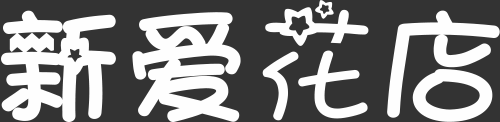
<style>
.page{position:relative;width:500px;height:122px;background:#333333}
.page>*{position:absolute;margin:0}
.t1{font:125px "AaShuiPingzuo";color:#fefefe;font-weight:bold}
</style>
<div class="page">
<p class="t1" style="left:1px;top:0px;width:499px;height:123px">新爱花店</p>
</div>
